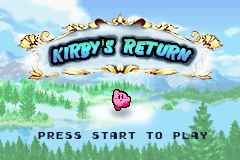
<style>
.page{position:relative;width:240px;height:160px}
.page>*{position:absolute;margin:0}
.t1{font:9px "GamegirlClassic";color:#1c1842}
</style>
<div class="page">
<p class="t1" style="left:38px;top:132px;width:170px;height:7px">PRESS START TO PLAY</p>
</div>
